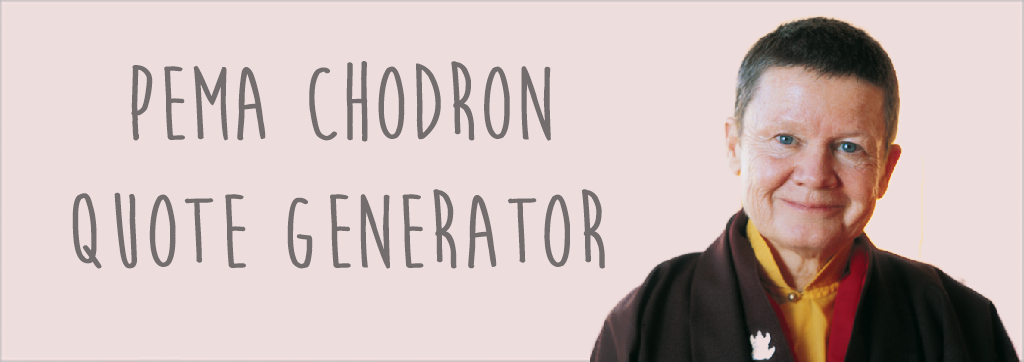
<style>
.page{position:relative;width:1024px;height:362px;background:#eedddd}
.page>*{position:absolute;margin:0}
.t1{font:106.7px "MoonFlowerBold";color:#736d6d;scale:1.11 1}
.t2{font:106.7px "MoonFlowerBold";color:#060606;scale:1.11 1}
</style>
<div class="page">
<p class="t1" style="left:72px;top:61px;width:533px;height:208px"><span class="t2"><br></span>   pema chodron<br> quote generator</p>
</div>
